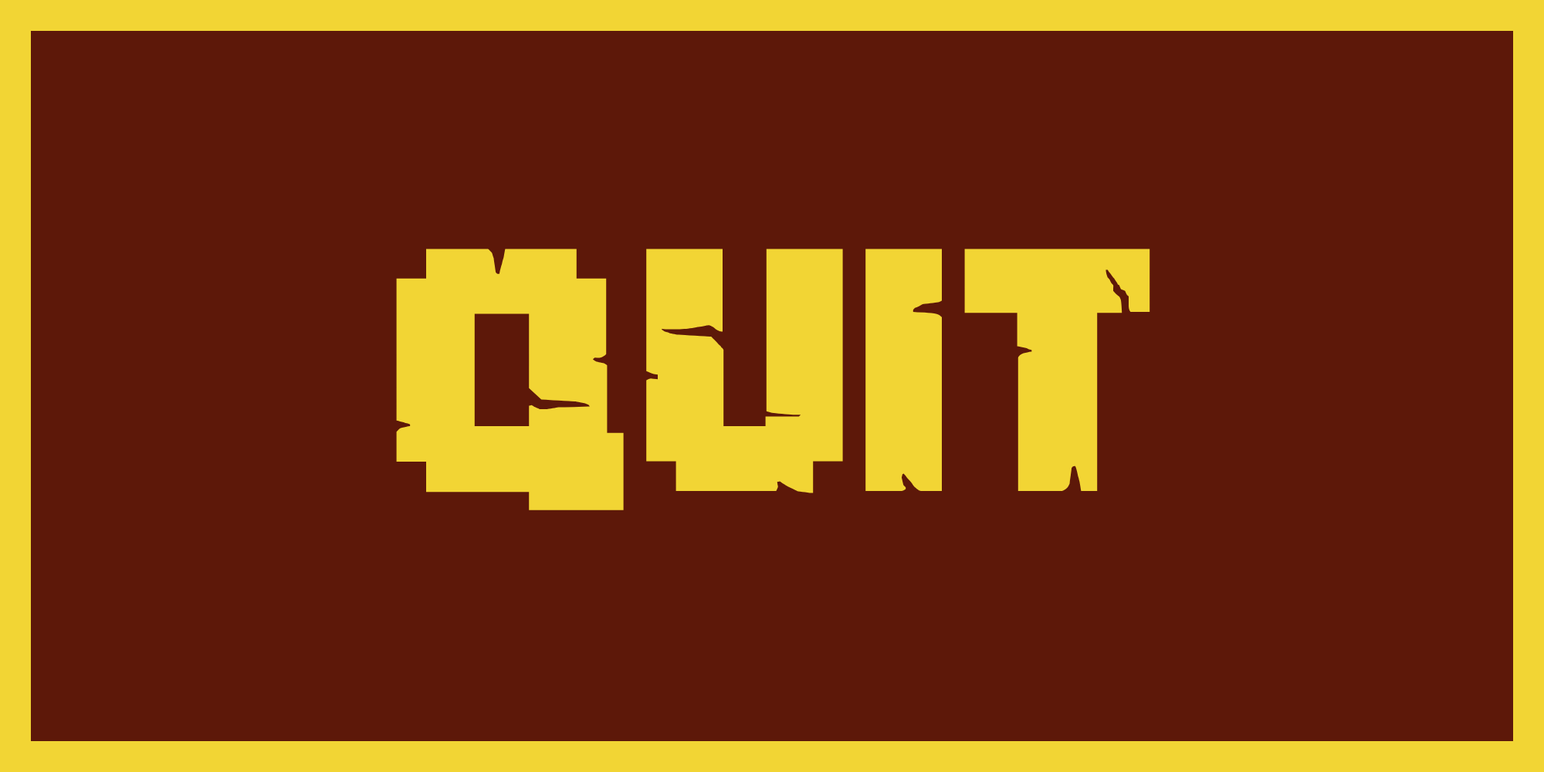
<style>
.page{position:relative;width:1544px;height:772px;background:#5d1809}
.page>*{position:absolute;margin:0}
.t1{font:308.9px "MinecrafterAlt";color:#f2d534}
</style>
<div class="page">
<p class="t1" style="left:396px;top:249px;width:755px;height:261px">QUIT</p>
</div>
